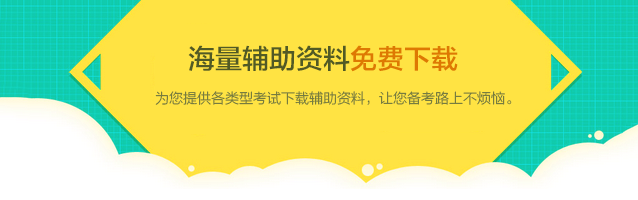
<style>
.page{position:relative;width:638px;height:200px;background:#ffe343}
.page>*{position:absolute;margin:0}
.t1{font:27px "FZLTZHK--GBK1-0";color:#515a25}
.t2{font:27px "FZLTZHK--GBK1-0";color:#de7902}
.t3{font:14px "FZLTXHK--GBK1-0";color:#6a733f}
</style>
<div class="page">
<p class="t1" style="left:188px;top:45px;width:270px;height:27px">海量辅助资料<span class="t2">免费下载</span></p>
<p class="t3" style="left:155px;top:91px;width:357px;height:14px">为您提供各类型考试下载辅助资料，让您备考路上不烦恼。</p>
</div>
